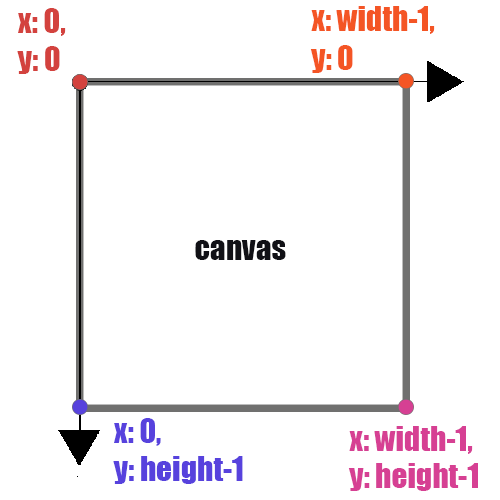
<style>
.page{position:relative;width:500px;height:500px;background:#ffffff}
.page>*{position:absolute;margin:0}
.t1{font:32.5px "Impact";color:#f45525;scale:0.96 1}
.t2{font:31.2px "Impact";color:#d3423e}
.t3{font:31.2px "Impact";color:#111116}
.t4{font:31.2px "Impact";color:#5742dd}
.t5{font:31.2px "Impact";color:#d64093}
</style>
<div class="page">
<p class="t1" style="left:310px;top:6px;width:125px;height:67px">x: width-1,<br>y: 0</p>
<p class="t2" style="left:17px;top:8px;width:49px;height:66px">x: 0,<br>y: 0</p>
<p class="t3" style="left:195px;top:240px;width:91px;height:20px">canvas</p>
<p class="t4" style="left:113px;top:418px;width:130px;height:66px">x: 0,<br>y: height-1</p>
<p class="t5" style="left:348px;top:426px;width:130px;height:65px">x: width-1,<br>y: height-1</p>
</div>
